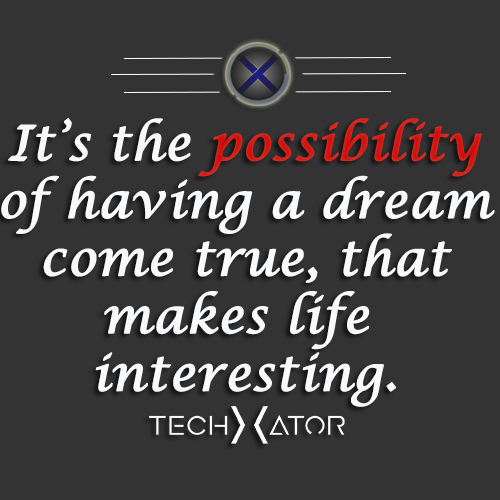
<style>
.page{position:relative;width:500px;height:500px;background:#333333}
.page>*{position:absolute;margin:0}
.t1{font:48px "LucidaCalligraphy-Italic";color:#f8f9fb;font-weight:bold}
.t2{font:48px "LucidaCalligraphy-Italic";color:#f7f7f8;font-weight:bold}
.t3{font:48px "LucidaCalligraphy-Italic";color:#d00707;font-weight:bold}
</style>
<div class="page">
<p class="t1" style="left:1px;top:118px;width:494px;height:289px;text-align:center"><span class="t2">It’s the </span><span class="t3">possibility<br></span>of having a dream<br>come true, that<br>makes life <br>interesting.</p>
</div>
